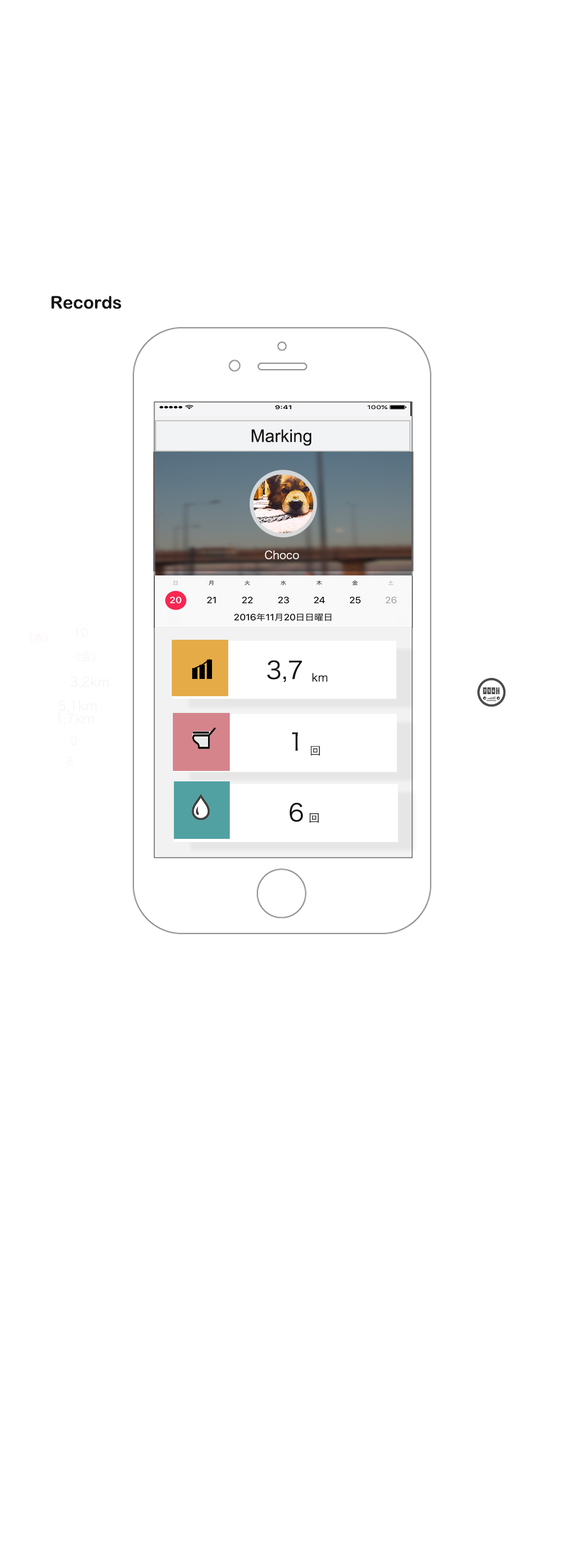
<style>
.page{position:relative;width:564px;height:1568px;background:#ffffff}
.page>*{position:absolute;margin:0}
.t1{font:17.4px "ArialRoundedMTBold";color:#171616}
.t2{font:17.4px "ArialMT";color:#171616}
.t3{font:10.9px "HiraKakuProN-W3";color:#f8f6f5}
.t4{font:10.9px "HiraKakuProN-W3";color:#faf6f5}
.t5{font:24px "HiraKakuProN-W3";color:#131616}
.t6{font:13.1px "HiraKakuProN-W3";color:#f8f6f5}
.t7{font:10.9px "HiraKakuProN-W3";color:#131616}
</style>
<div class="page">
<p class="t1" style="left:51px;top:296px;width:70px;height:13px">Records</p>
<p class="t2" style="left:252px;top:429px;width:60px;height:17px">Marking</p>
<p class="t3" style="left:265px;top:550px;width:34px;height:9px">Choco</p>
<p class="t4" style="left:75px;top:628px;width:13px;height:9px">10</p>
<p class="t4" style="left:29px;top:632px;width:19px;height:11px">（木）</p>
<p class="t4" style="left:77px;top:651px;width:18px;height:11px">（金）</p>
<p class="t5" style="left:267px;top:660px;width:35px;height:22px">3,7</p>
<p class="t6" style="left:70px;top:676px;width:39px;height:13px">3,2km</p>
<p class="t7" style="left:313px;top:673px;width:15px;height:9px">km</p>
<p class="t6" style="left:58px;top:700px;width:39px;height:12px">5,1km</p>
<p class="t6" style="left:57px;top:713px;width:37px;height:12px">1,7km</p>
<p class="t4" style="left:71px;top:736px;width:6px;height:9px">９</p>
<p class="t5" style="left:292px;top:732px;width:6px;height:19px">1</p>
<p class="t7" style="left:311px;top:746px;width:9px;height:10px">回</p>
<p class="t4" style="left:66px;top:756px;width:7px;height:9px">８</p>
<p class="t5" style="left:290px;top:803px;width:13px;height:19px">6</p>
<p class="t7" style="left:309px;top:813px;width:10px;height:10px">回</p>
</div>
